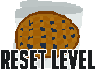
<style>
.page{position:relative;width:96px;height:70px;background:#ffffff}
.page>*{position:absolute;margin:0}
.t1{font:25px "BigNoodleTitling";color:#1a1d1f;font-weight:bold}
</style>
<div class="page">
<p class="t1" style="left:1px;top:50px;width:94px;height:19px">Reset Level</p>
</div>
